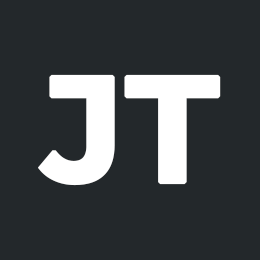
<style>
.page{position:relative;width:260px;height:260px;background:#23282b}
.page>*{position:absolute;margin:0}
.t1{font:150px "Montserrat-Bold";color:#ffffff;text-transform:uppercase;font-weight:bold}
</style>
<div class="page">
<p class="t1" style="left:38px;top:74px;width:183px;height:112px">JT</p>
</div>
